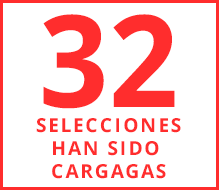
<style>
.page{position:relative;width:219px;height:190px;background:#ffffff}
.page>*{position:absolute;margin:0}
.t1{font:127.7px "OpenSans-Bold";letter-spacing:0.005em;color:#ff2d2d;text-transform:uppercase;scale:0.95 1}
.t2{font:19.3px "OpenSans-Bold";letter-spacing:0.1em;color:#ff2d2d;text-transform:uppercase}
.t3{font:19.3px "OpenSans-Bold";letter-spacing:0.1em;color:#000000;text-transform:uppercase}
</style>
<div class="page">
<p class="t1" style="left:43px;top:14px;width:132px;height:95px">32</p>
<p class="t2" style="left:36px;top:118px;width:145px;height:61px;text-align:center"><span class="t3"><br></span>SELECCIONES<br>HAN SIDO <br>CARGAGAS</p>
</div>
